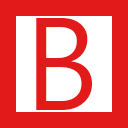
<style>
.page{position:relative;width:128px;height:128px;background:#e21a1a}
.page>*{position:absolute;margin:0}
.t1{font:128px "MalgunGothic";color:#e21a1a}
</style>
<div class="page">
<p class="t1" style="left:36px;top:18px;width:57px;height:92px">B</p>
</div>
